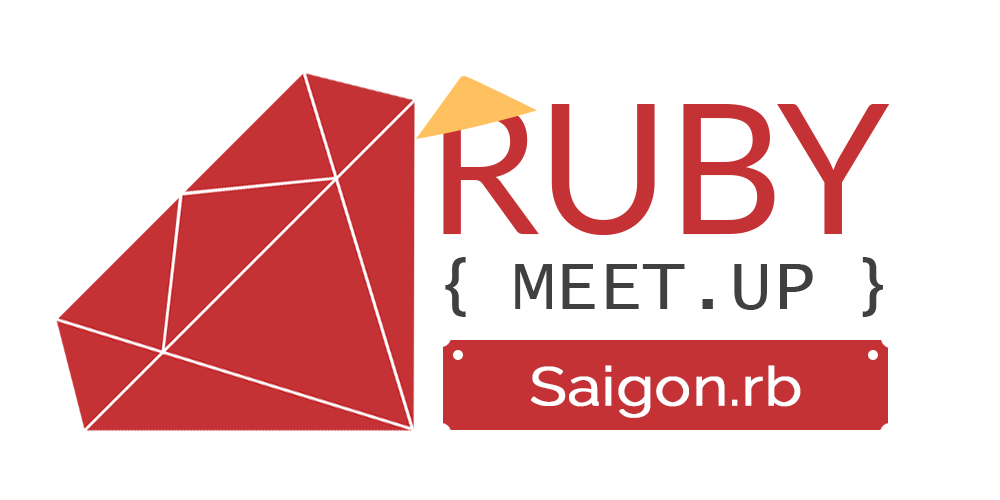
<style>
.page{position:relative;width:1000px;height:500px;background:#ffffff}
.page>*{position:absolute;margin:0}
.t1{font:180px "Lato-Regular";letter-spacing:-0.012em;color:#c53236}
.t2{font:72px "LucidaConsole";color:#404040}
.t3{font:72px "Muli";color:#404040}
.t4{font:54px "Raleway-Regular";color:#ffffff;font-weight:bold;scale:1.11 1}
</style>
<div class="page">
<p class="t1" style="left:443px;top:104px;width:447px;height:131px">RUBY</p>
<p class="t2" style="left:445px;top:257px;width:438px;height:60px"><span class="t3">{</span> MEET.UP <span class="t3">}</span></p>
<p class="t4" style="left:531px;top:365px;width:270px;height:53px">Saigon.rb</p>
</div>
